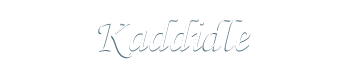
<style>
.page{position:relative;width:357px;height:73px;background:#ffffff}
.page>*{position:absolute;margin:0}
.t1{font:47.8px "MonotypeCorsiva"}
</style>
<div class="page">
<p class="t1" style="left:98px;top:18px;width:153px;height:41px">Kaddidle</p>
</div>
